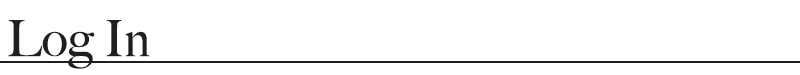
<style>
.page{position:relative;width:800px;height:75px;background:#ffffff}
.page>*{position:absolute;margin:0}
.t1{font:50px "BigCaslon-Medium";color:#1e201e}
</style>
<div class="page">
<p class="t1" style="left:8px;top:20px;width:142px;height:49px">Log In</p>
</div>
